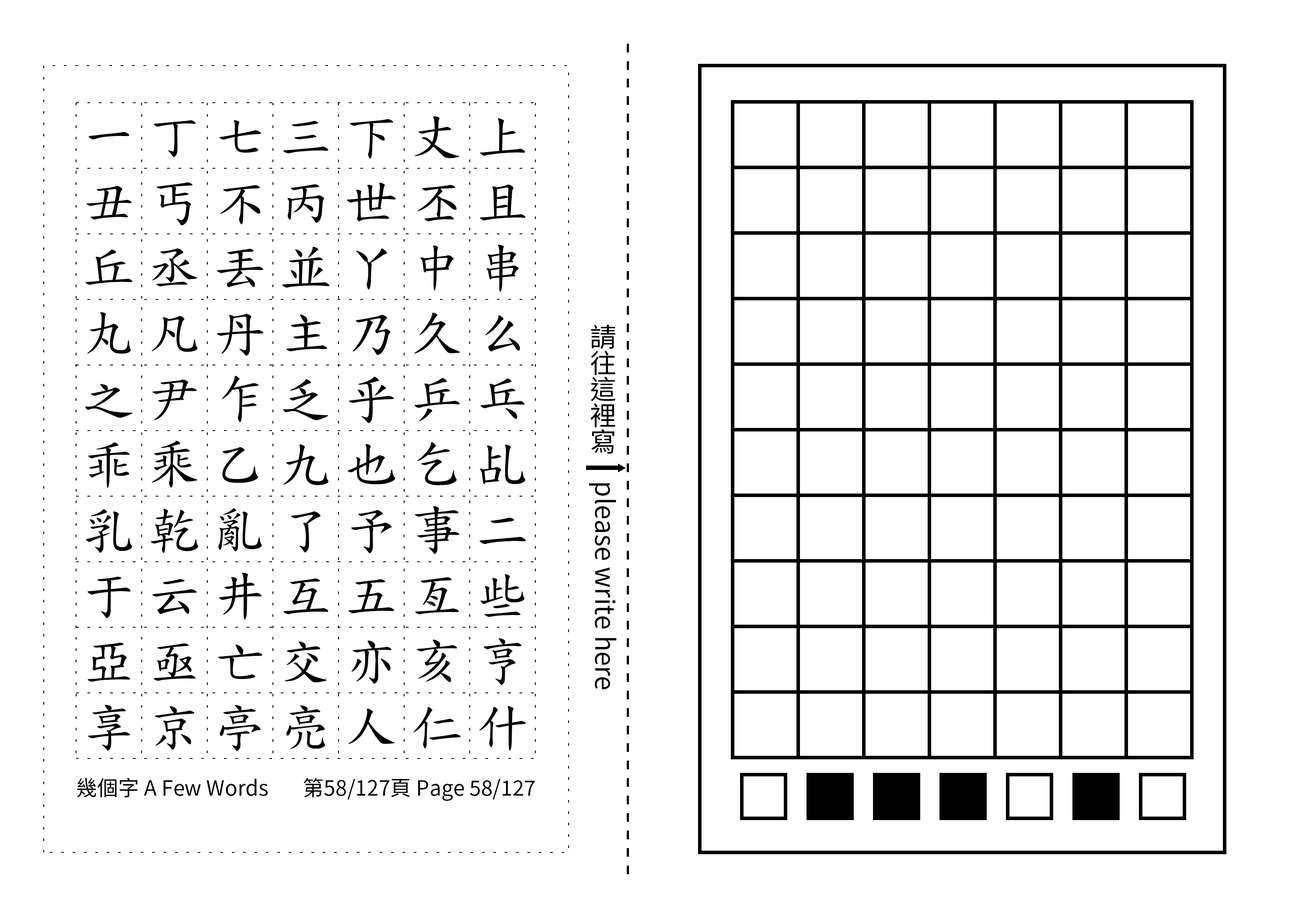
<style>
.page{position:relative;width:1299px;height:918px;background:#ffffff}
.page>*{position:absolute;margin:0}
.t1{font:52.5px/65.6px "TW-Kai-98_1";letter-spacing:0.25em;color:#000000}
.t2{font:26.2px "SourceHanSansTC-Regular";color:#000000}
.t3{font:21px "SourceHanSansTC-Regular";color:#000000}
</style>
<div class="page">
<p class="t1" style="left:85px;top:116px;width:441px;height:636px;text-align:center">一丁七三下丈上丑丐不丙世丕且丘丞丟並丫中串丸凡丹主乃久么之尹乍乏乎乒乓乖乘乙九也乞乩乳乾亂了予事二于云井互五亙些亞亟亡交亦亥亨享京亭亮人仁什</p>
<p class="t2" style="left:589px;top:324px;width:28px;height:366px;text-align:center">請往這裡寫　please write here</p>
<p class="t3" style="left:77px;top:778px;width:191px;height:20px">幾個字 A Few Words</p>
<p class="t3" style="left:303px;top:778px;width:232px;height:23px">第58/127頁 Page 58/127</p>
</div>
